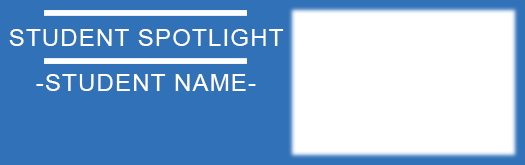
<style>
.page{position:relative;width:525px;height:165px;background:#3171b8}
.page>*{position:absolute;margin:0}
.t1{font:24.2px "ArialMT";letter-spacing:0.05em;color:#ffffff}
</style>
<div class="page">
<p class="t1" style="left:9px;top:29px;width:275px;height:17px">STUDENT SPOTLIGHT</p>
<p class="t1" style="left:36px;top:74px;width:220px;height:17px">-STUDENT NAME-</p>
</div>
